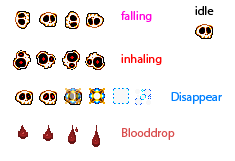
<style>
.page{position:relative;width:235px;height:161px;background:#ffffff}
.page>*{position:absolute;margin:0}
.t1{font:12px "MyriadPro-Regular";color:#000000}
.t2{font:12px "MyriadPro-Regular";color:#ff03dd}
.t3{font:12px "MyriadPro-Regular";color:#ff0202}
.t4{font:12px "MyriadPro-Regular";color:#0080ff}
.t5{font:12px "MyriadPro-Regular";color:#d94e4e}
</style>
<div class="page">
<p class="t1" style="left:195px;top:6px;width:19px;height:9px">idle</p>
<p class="t2" style="left:121px;top:11px;width:31px;height:11px">falling</p>
<p class="t3" style="left:121px;top:54px;width:41px;height:11px">inhaling</p>
<p class="t4" style="left:171px;top:92px;width:51px;height:12px">Disappear</p>
<p class="t5" style="left:122px;top:128px;width:53px;height:12px">Blooddrop</p>
</div>
